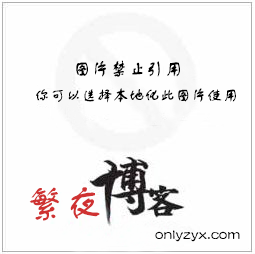
<style>
.page{position:relative;width:255px;height:254px;background:#fefefe}
.page>*{position:absolute;margin:0}
.t1{font:18.3px "FZSTK--GBK1-0";color:#000000}
.t2{font:12px "FZSTK--GBK1-0";color:#000000}
.t3{font:39.2px "FZSTK--GBK1-0";color:#cf3232}
</style>
<div class="page">
<p class="t1" style="left:76px;top:60px;width:104px;height:17px">图片禁止引用</p>
<p class="t2" style="left:36px;top:88px;width:200px;height:15px">你可以选择本地化此图片使用</p>
<p class="t3" style="left:29px;top:187px;width:71px;height:34px">繁夜</p>
<p class="t2" style="left:155px;top:230px;width:85px;height:12px">onlyzyx.com</p>
</div>
